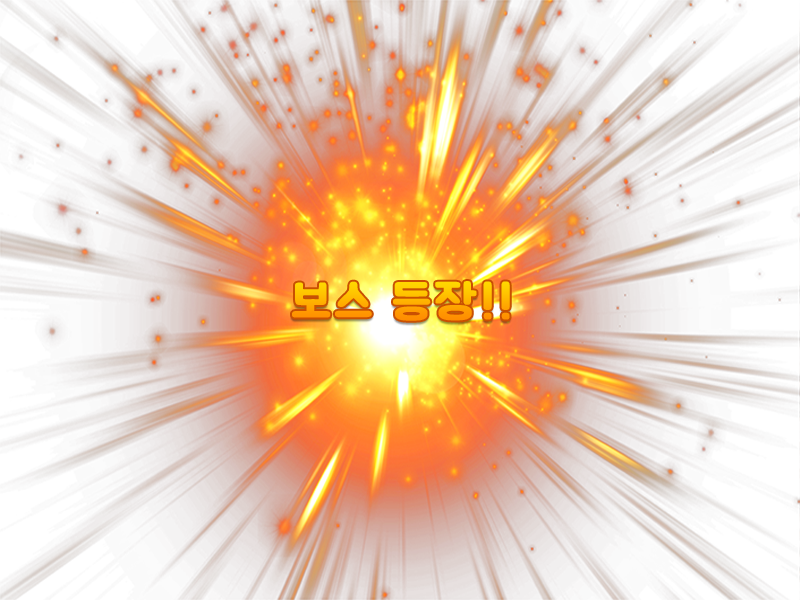
<style>
.page{position:relative;width:800px;height:600px}
.page>*{position:absolute;margin:0}
.t1{font:48px "BMJUA";letter-spacing:0.06em;font-weight:bold}
</style>
<div class="page">
<p class="t1" style="left:292px;top:281px;width:218px;height:40px">보스 등장!!</p>
</div>
